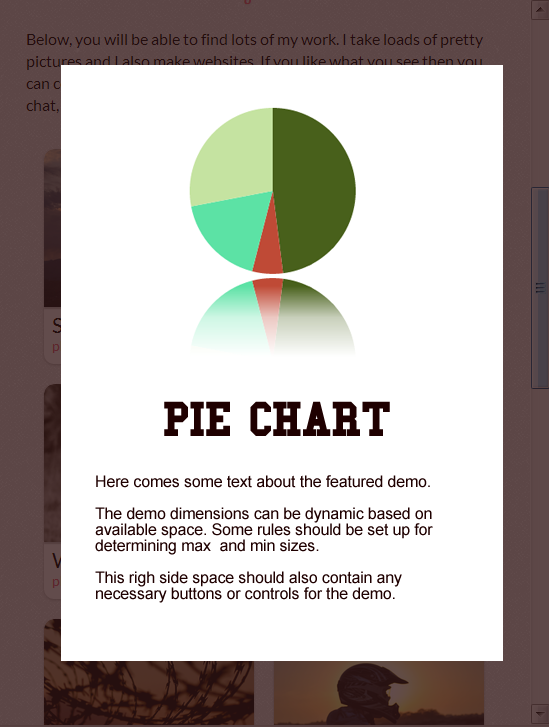
<style>
.page{position:relative;width:549px;height:727px;background:#ffffff}
.page>*{position:absolute;margin:0}
.t1{font:50px "CollegeBold";letter-spacing:-0.05em;color:#1f0000}
.t2{font:16px/16px "ArialMT";letter-spacing:-0.01em;color:#1f0000}
</style>
<div class="page">
<p class="t1" style="left:164px;top:401px;width:226px;height:35px">PIE CHART</p>
<p class="t2" style="left:95px;top:475px;width:338px;height:128px">Here comes some text about the featured demo.<br><br>The demo dimensions can be dynamic based on<br>available space. Some rules should be set up for <br>determining max  and min sizes.<br><br>This righ side space should also contain any <br>necessary buttons or controls for the demo.</p>
</div>
